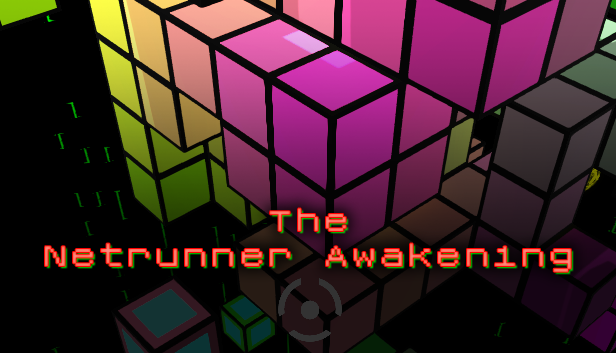
<style>
.page{position:relative;width:616px;height:353px;background:#000000}
.page>*{position:absolute;margin:0}
.t1{font:45px/35px "Roentgen-NBP";color:#ff7563}
</style>
<div class="page">
<p class="t1" style="left:45px;top:208px;width:526px;height:64px;text-align:center">The<br>Netrunner Awaken1ng</p>
</div>
